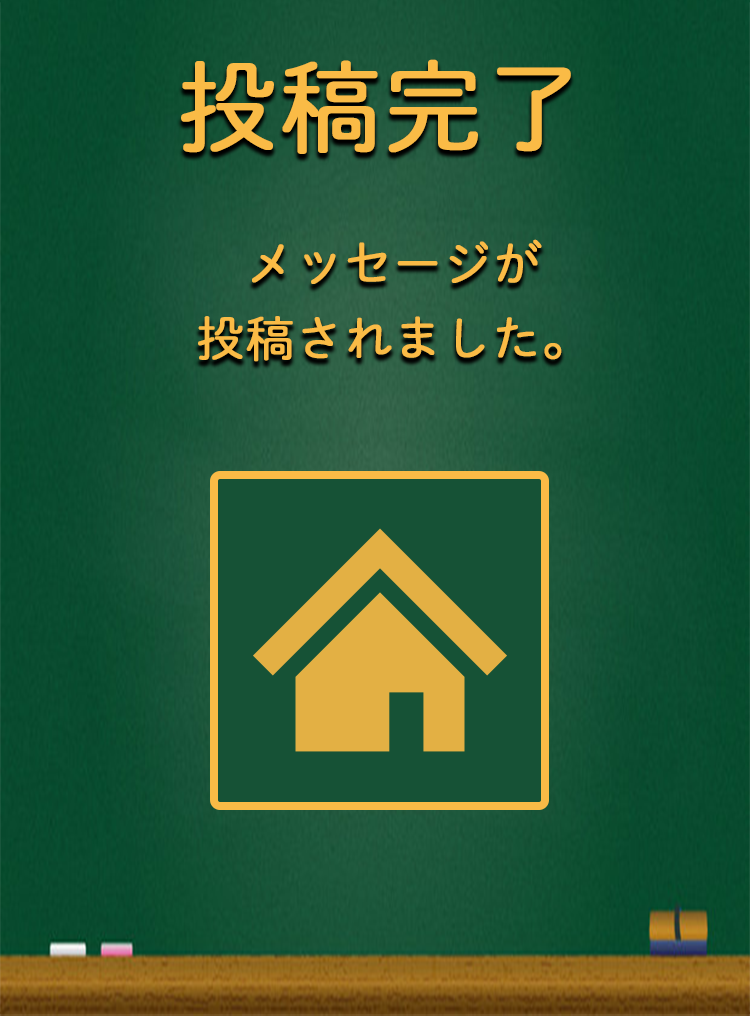
<style>
.page{position:relative;width:750px;height:1016px}
.page>*{position:absolute;margin:0}
.t1{font:100px "DNPShueiMGoStd-L";color:#fabb46;font-weight:bold}
.t2{font:48px/37.2px "DNPShueiMGoStd-L";color:#fabb46;font-weight:bold}
</style>
<div class="page">
<p class="t1" style="left:181px;top:59px;width:390px;height:95px">投稿完了</p>
<p class="t2" style="left:198px;top:239px;width:364px;height:123px;text-align:center">メッセージが<br><br>投稿されました。</p>
</div>
